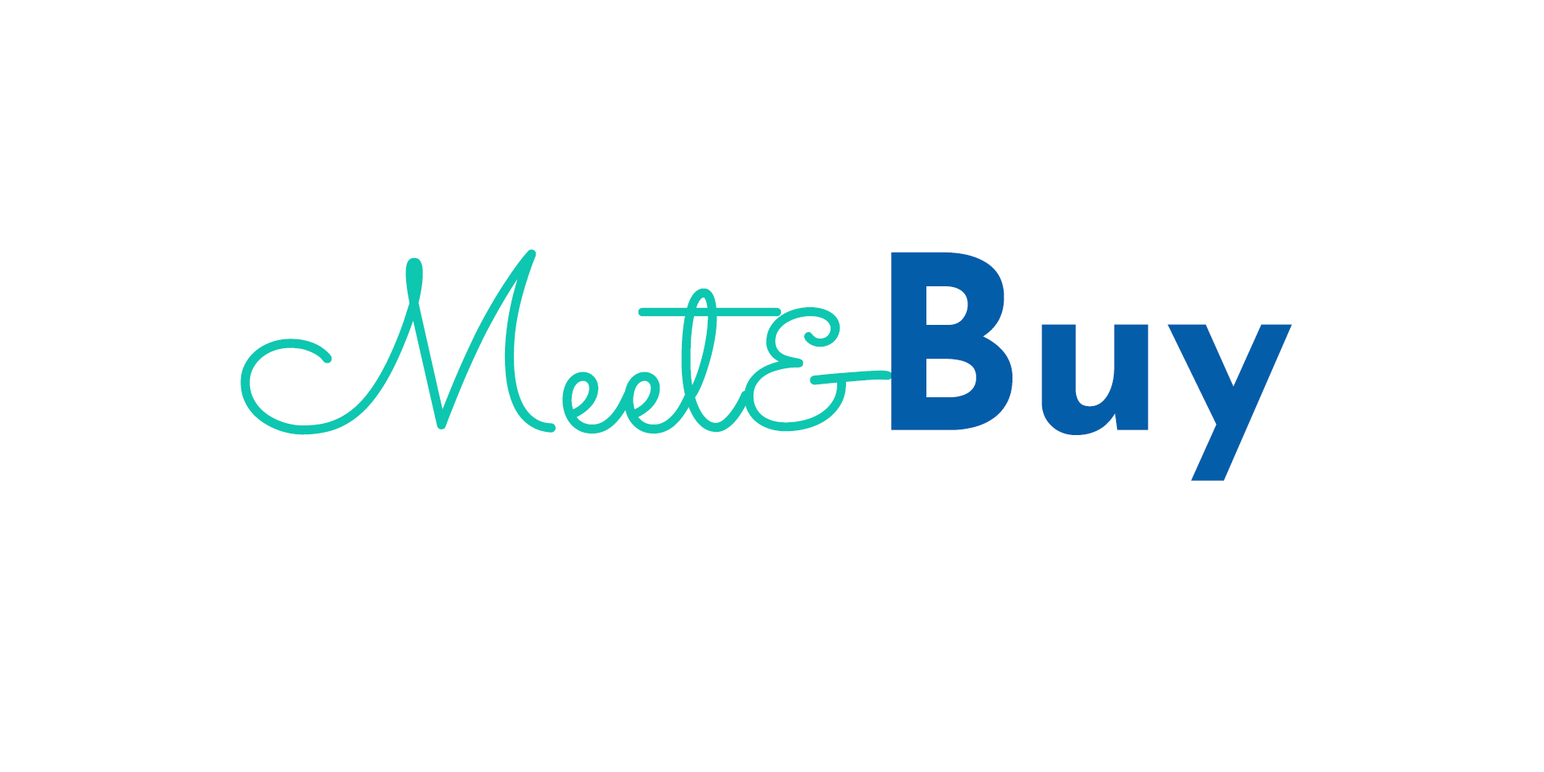
<style>
.page{position:relative;width:1544px;height:772px;background:#ffffff}
.page>*{position:absolute;margin:0}
.t1{font:241.3px "Sacramento-Regular";color:#0dc7b0}
.t2{font:241.3px "JosefinSansRoman-Bold";color:#035da9}
</style>
<div class="page">
<p class="t1" style="left:240px;top:249px;width:1053px;height:232px">Meet&amp;<span class="t2">Buy</span></p>
</div>
